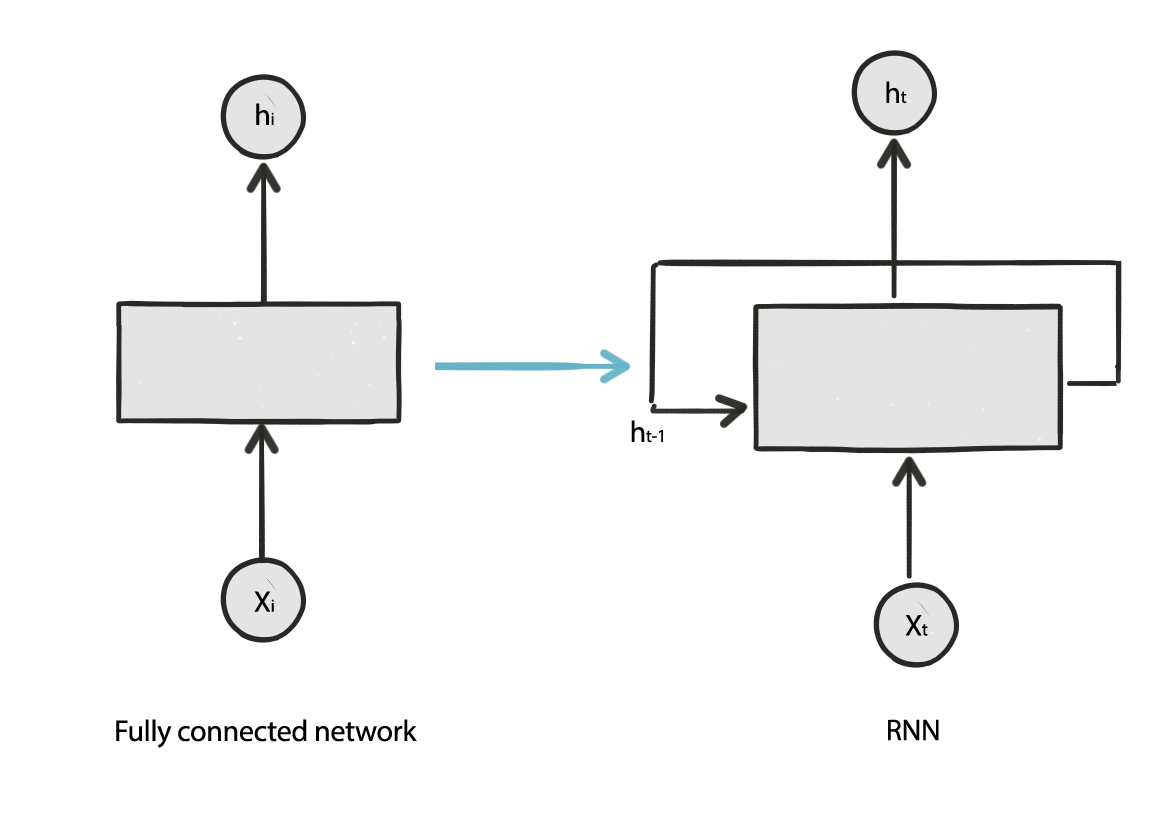
<style>
.page{position:relative;width:1159px;height:825px;background:#ffffff}
.page>*{position:absolute;margin:0}
.t1{font:30px "MyriadPro-Regular";letter-spacing:-0.01em;color:#000000}
.t2{font:18px "MyriadPro-Regular";letter-spacing:-0.01em;color:#000000}
</style>
<div class="page">
<p class="t1" style="left:886px;top:81px;width:21px;height:23px">h<span class="t2">t</span></p>
<p class="t1" style="left:256px;top:103px;width:18px;height:22px">h<span class="t2">i</span></p>
<p class="t2" style="left:631px;top:420px;width:32px;height:23px"><span class="t1">h</span>t-1</p>
<p class="t1" style="left:254px;top:591px;width:20px;height:21px">X<span class="t2">i</span></p>
<p class="t1" style="left:905px;top:615px;width:23px;height:21px">X<span class="t2">t</span></p>
<p class="t1" style="left:116px;top:719px;width:301px;height:29px">Fully connected network</p>
<p class="t1" style="left:888px;top:719px;width:51px;height:22px">RNN</p>
</div>
